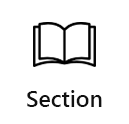
<style>
.page{position:relative;width:129px;height:124px;background:#ffffff}
.page>*{position:absolute;margin:0}
.t1{font:22.9px "YuGothicUI-Semibold";color:#111111}
</style>
<div class="page">
<p class="t1" style="left:27px;top:90px;width:75px;height:17px">Section</p>
</div>
